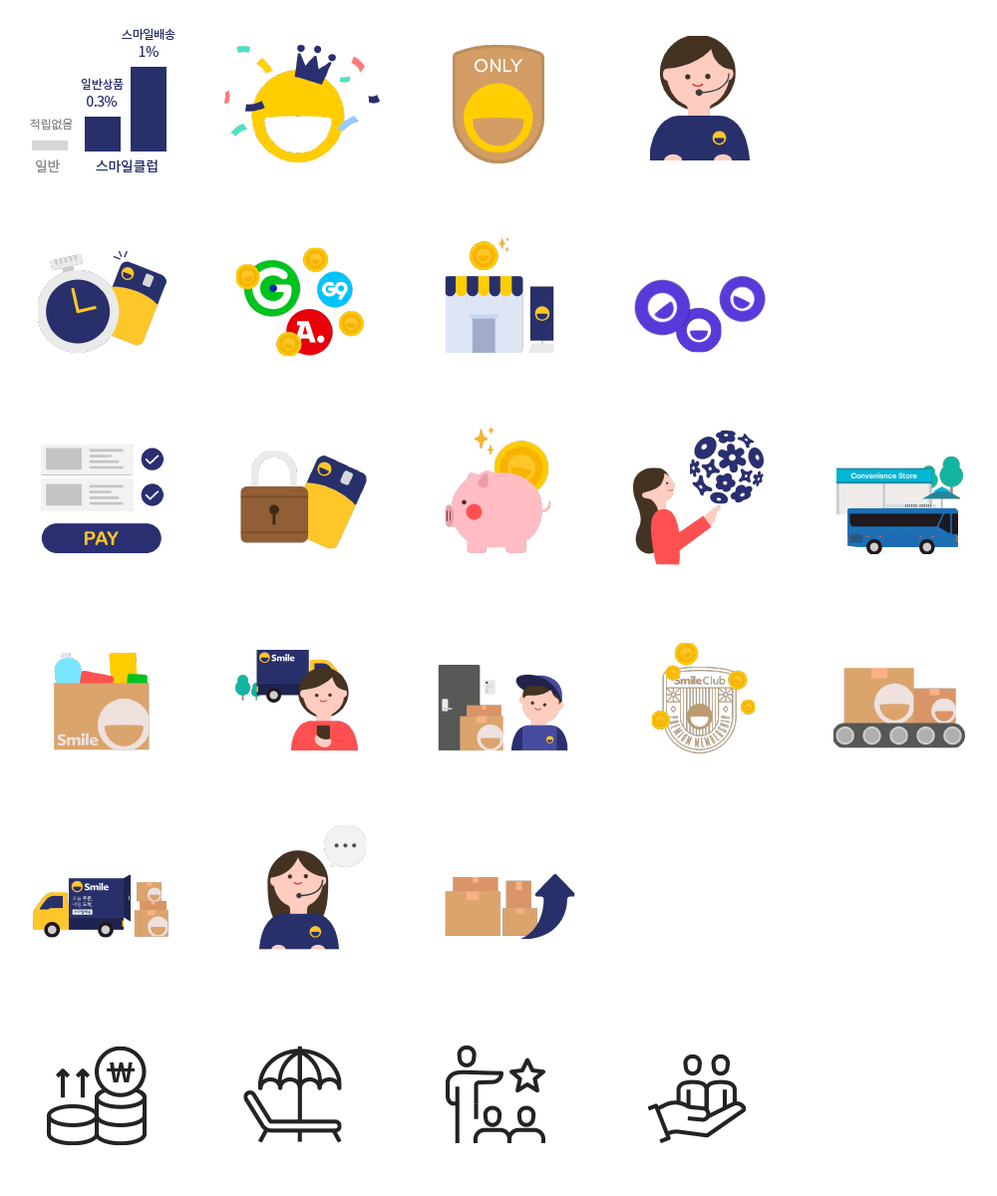
<style>
.page{position:relative;width:997px;height:1196px;background:#ffffff}
.page>*{position:absolute;margin:0}
.t1{font:12px "NotoSansCJKkr-Regular";letter-spacing:-0.025em;color:#28306b;text-transform:uppercase}
.t2{font:14px "NotoSansCJKkr-Regular";letter-spacing:-0.025em;color:#28306b;text-transform:uppercase}
.t3{font:12px "NotoSansCJKkr-Regular";letter-spacing:-0.025em;color:#898989;text-transform:uppercase}
.t4{font:14px "NotoSansCJKkr-Regular";letter-spacing:-0.025em;color:#898989;text-transform:uppercase}
.t5{font:25.9px "NotoSansCJKkr-Bold";letter-spacing:-0.025em;color:#232323}
</style>
<div class="page">
<p class="t1" style="left:122px;top:28px;width:53px;height:12px">스마일배송</p>
<p class="t2" style="left:139px;top:46px;width:19px;height:11px">1%</p>
<p class="t1" style="left:81px;top:78px;width:43px;height:12px">일반상품</p>
<p class="t2" style="left:87px;top:96px;width:31px;height:11px">0.3%</p>
<p class="t3" style="left:30px;top:119px;width:43px;height:11px">적립없음</p>
<p class="t4" style="left:36px;top:159px;width:24px;height:13px">일반</p>
<p class="t2" style="left:96px;top:159px;width:62px;height:14px">스마일클럽</p>
<p class="t5" style="left:110px;top:1063px;width:23px;height:20px">W</p>
</div>
